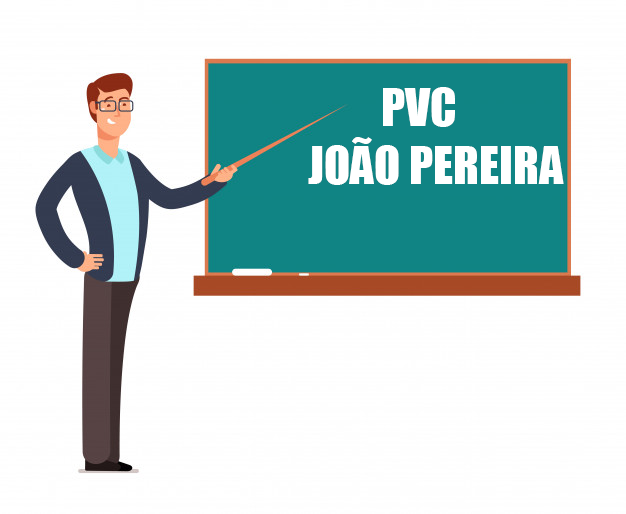
<style>
.page{position:relative;width:626px;height:514px;background:#ffffff}
.page>*{position:absolute;margin:0}
.t1{font:48px "Impact";color:#ffffff}
</style>
<div class="page">
<p class="t1" style="left:383px;top:87px;width:72px;height:40px">PVC</p>
<p class="t1" style="left:308px;top:137px;width:256px;height:48px">JOÃO PEREIRA</p>
</div>
